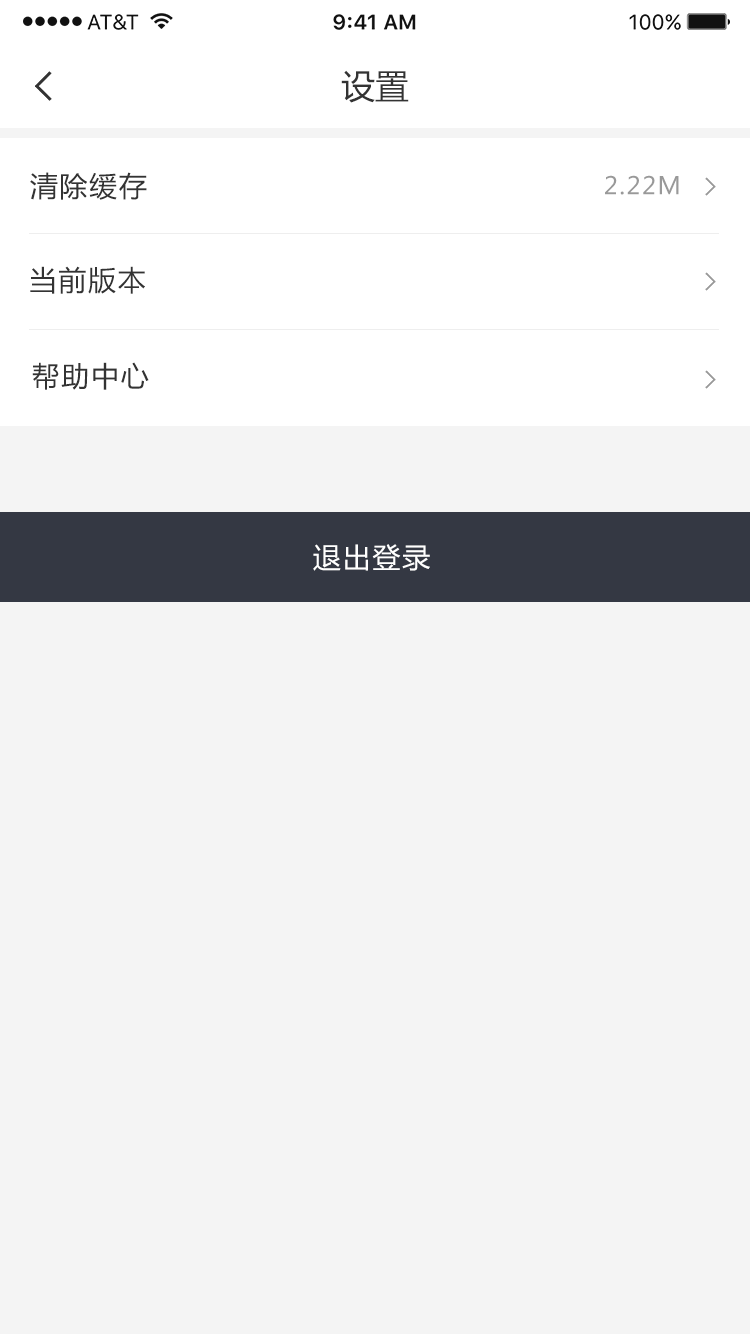
<style>
.page{position:relative;width:750px;height:1334px;background:#f4f4f4}
.page>*{position:absolute;margin:0}
.t1{font:34px "MicrosoftYaHei";color:#333333}
.t2{font:28px "MicrosoftYaHei";letter-spacing:0.06em;color:#333333}
.t3{font:24px "MicrosoftYaHei";letter-spacing:0.06em;color:#999999}
.t4{font:28px "MicrosoftYaHei";letter-spacing:0.06em;color:#ffffff}
</style>
<div class="page">
<p class="t1" style="left:341px;top:70px;width:68px;height:33px">设置</p>
<p class="t2" style="left:30px;top:172px;width:117px;height:28px">清除缓存</p>
<p class="t3" style="left:605px;top:175px;width:74px;height:20px">2.22M</p>
<p class="t2" style="left:30px;top:266px;width:115px;height:28px">当前版本</p>
<p class="t2" style="left:32px;top:362px;width:117px;height:28px">帮助中心</p>
<p class="t4" style="left:313px;top:544px;width:117px;height:27px">退出登录</p>
</div>
